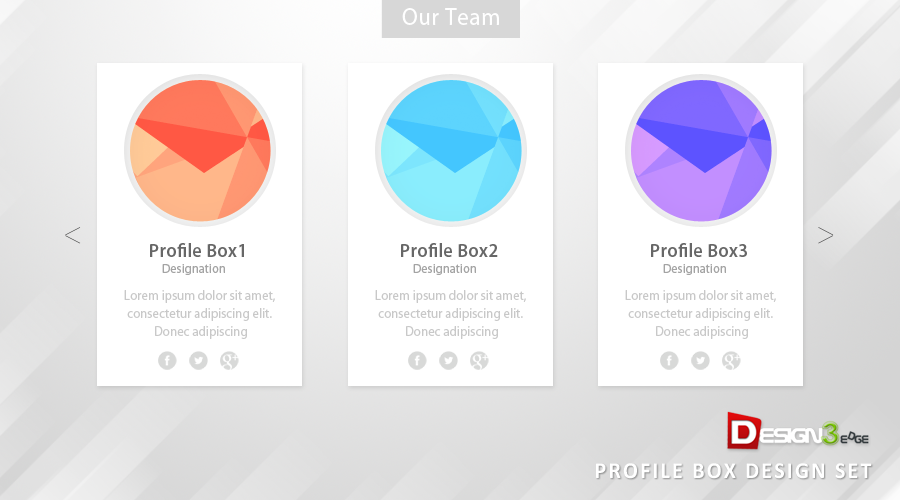
<style>
.page{position:relative;width:900px;height:500px;background:#ffffff}
.page>*{position:absolute;margin:0}
.t1{font:24.2px "MyriadPro-Regular";letter-spacing:0.025em;color:#ffffff;scale:0.95 1}
.t2{font:18.9px "MyriadPro-Semibold";letter-spacing:0.025em;color:#676767;scale:0.95 1}
.t3{font:12.6px "MyriadPro-Regular";letter-spacing:0.025em;color:#a4a4a4;scale:0.95 1}
.t4{font:13.7px/18px "MyriadPro-Regular";color:#c8c8c8;scale:0.95 1}
.t5{font:23.1px "Calibri-Bold";letter-spacing:0.1em;color:#ffffff;text-transform:uppercase;scale:0.95 1}
</style>
<div class="page">
<p class="t1" style="left:402px;top:8px;width:97px;height:17px">Our Team</p>
<p class="t2" style="left:150px;top:243px;width:94px;height:14px">Profile Box1</p>
<p class="t2" style="left:401px;top:243px;width:97px;height:14px">Profile Box2</p>
<p class="t2" style="left:651px;top:243px;width:96px;height:14px">Profile Box3</p>
<p class="t3" style="left:162px;top:264px;width:63px;height:11px">Designation</p>
<p class="t3" style="left:413px;top:264px;width:63px;height:11px">Designation</p>
<p class="t3" style="left:663px;top:264px;width:63px;height:11px">Designation</p>
<p class="t4" style="left:124px;top:290px;width:151px;height:49px;text-align:center">Lorem ipsum dolor sit amet, <br>consectetur adipiscing elit. <br>Donec adipiscing</p>
<p class="t4" style="left:375px;top:290px;width:151px;height:49px;text-align:center">Lorem ipsum dolor sit amet, <br>consectetur adipiscing elit. <br>Donec adipiscing</p>
<p class="t4" style="left:625px;top:290px;width:151px;height:49px;text-align:center">Lorem ipsum dolor sit amet, <br>consectetur adipiscing elit. <br>Donec adipiscing</p>
<p class="t5" style="left:596px;top:463px;width:276px;height:16px">Profile Box Design Set</p>
</div>
